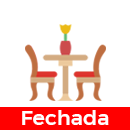
<style>
.page{position:relative;width:130px;height:130px;background:#ffffff}
.page>*{position:absolute;margin:0}
.t1{font:20.8px "Montserrat-Medium";color:#ffffff}
</style>
<div class="page">
<p class="t1" style="left:22px;top:110px;width:87px;height:15px">Fechada</p>
</div>
